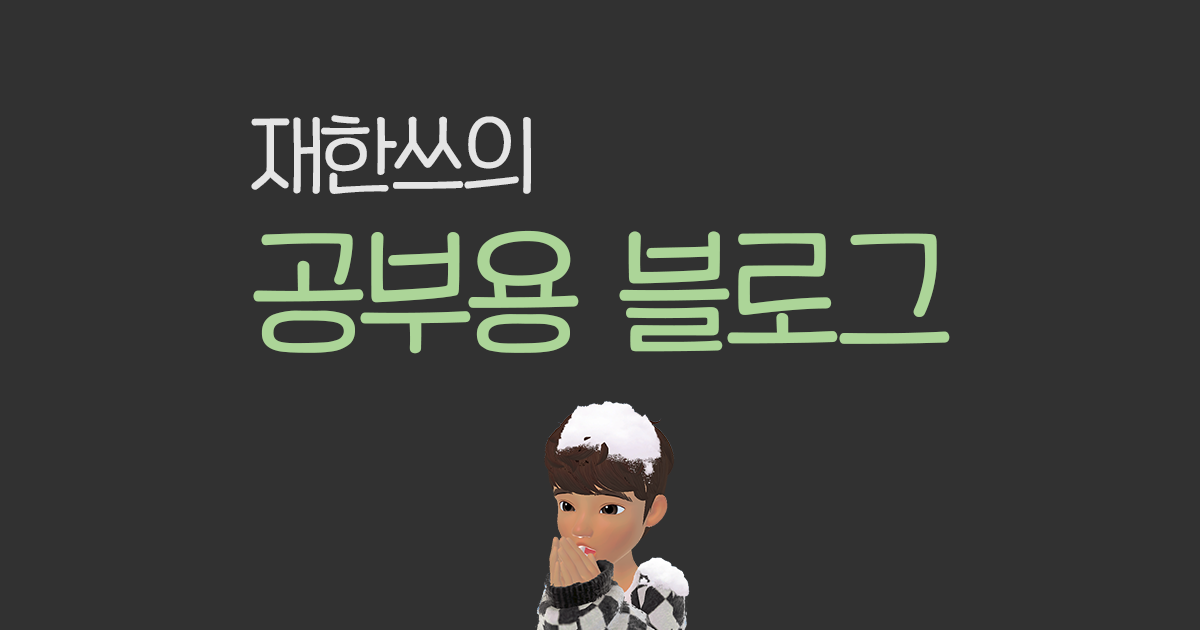
<style>
.page{position:relative;width:1200px;height:630px;background:#313131}
.page>*{position:absolute;margin:0}
.t1{font:125px "KoreanJJPP-M";letter-spacing:-0.03em;color:#acd598}
.t2{font:80px "KoreanJJPP-M";letter-spacing:-0.03em;color:#e5e5e5}
</style>
<div class="page">
<p class="t1" style="left:251px;top:115px;width:699px;height:239px"><span class="t2">재한쓰의<br></span>공부용 블로그</p>
</div>
